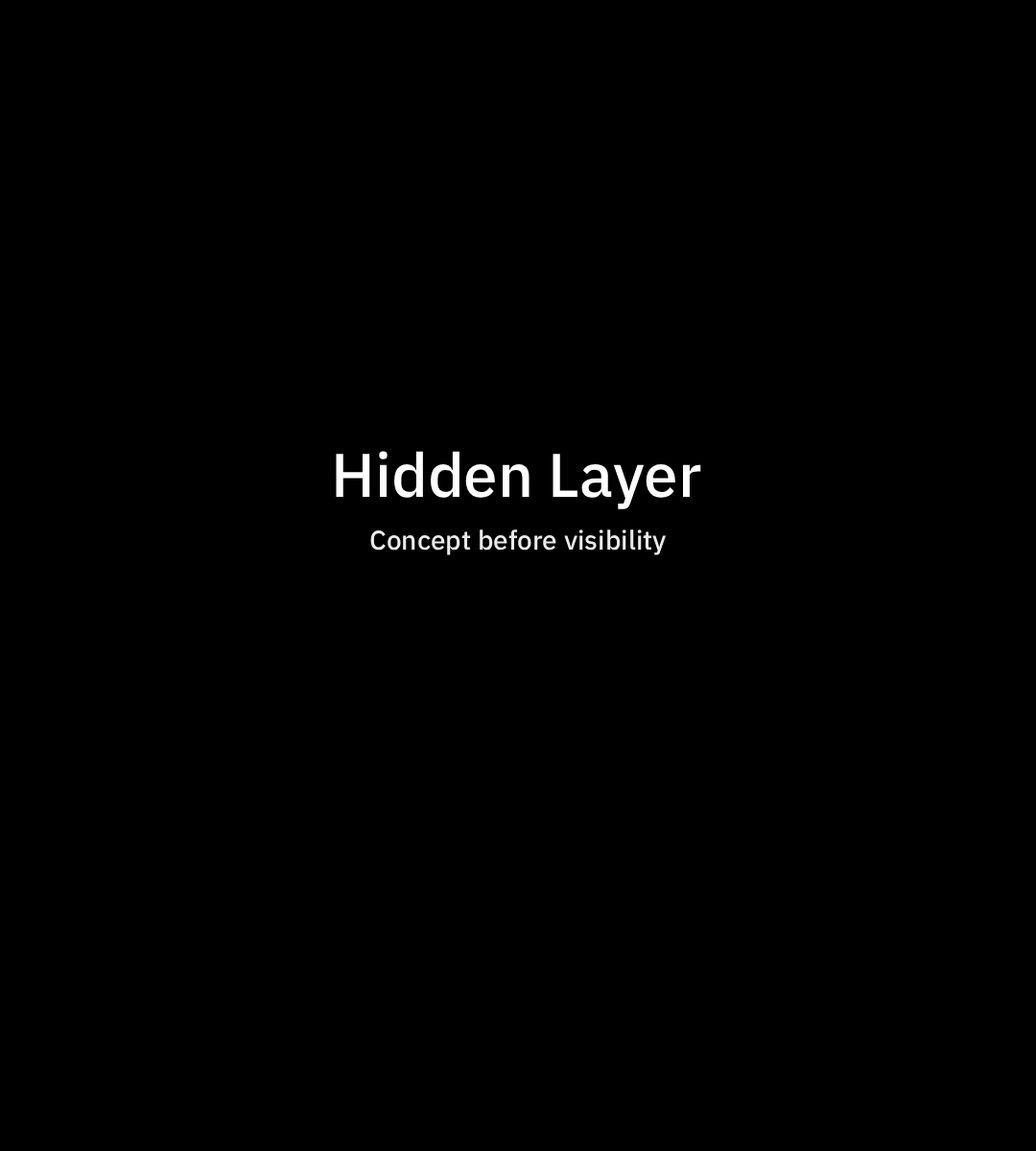
<style>
.page{position:relative;width:1036px;height:1151px;background:#000000}
.page>*{position:absolute;margin:0}
.t1{font:61.4px "IBMPlexSans-Medium";color:#ffffff}
.t2{font:26.9px "IBMPlexSans-Medium";color:#eaeaea}
</style>
<div class="page">
<p class="t1" style="left:336px;top:451px;width:365px;height:58px">Hidden Layer</p>
<p class="t2" style="left:370px;top:529px;width:297px;height:26px">Concept before visibility</p>
</div>
